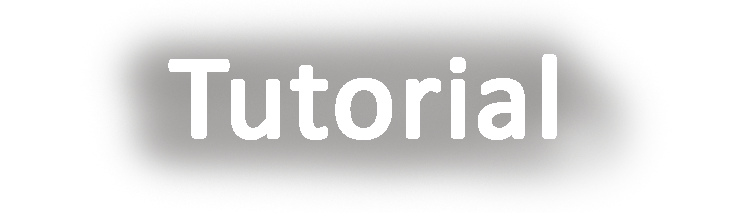
<style>
.page{position:relative;width:735px;height:213px;background:#ffffff}
.page>*{position:absolute;margin:0}
.t1{font:120px "Calibri";color:#ffffff;font-weight:bold}
</style>
<div class="page">
<p class="t1" style="left:168px;top:54px;width:389px;height:86px">Tutorial</p>
</div>
